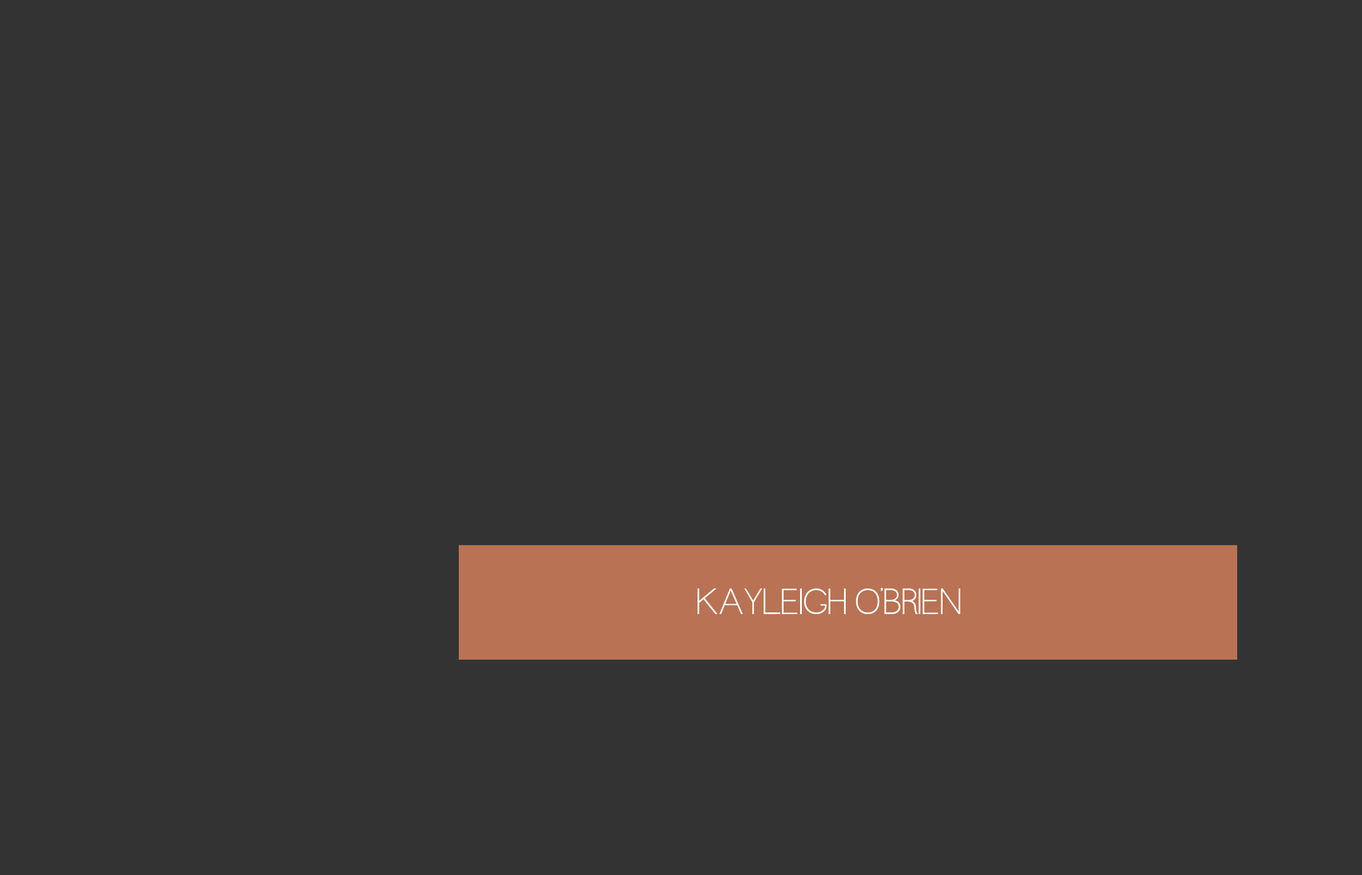
<style>
.page{position:relative;width:1362px;height:875px;background:#333333}
.page>*{position:absolute;margin:0}
.t1{font:41px "QuaverSans";color:#ffffff}
</style>
<div class="page">
<p class="t1" style="left:698px;top:588px;width:262px;height:26px">KAYLEIGH O’BRIEN</p>
</div>
